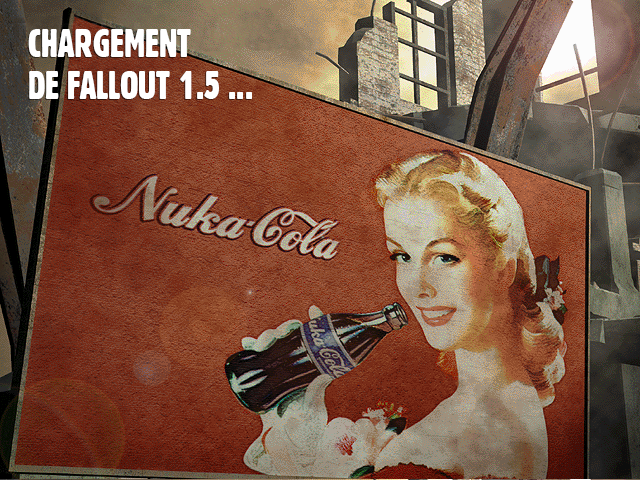
<style>
.page{position:relative;width:640px;height:480px}
.page>*{position:absolute;margin:0}
.t1{font:38.5px "Gothic821CondensedBT-Regular";color:#ffffff;scale:0.95 1}
</style>
<div class="page">
<p class="t1" style="left:28px;top:29px;width:224px;height:70px">CHARGEMENT<br>DE FALLOUT 1.5 ...</p>
</div>
